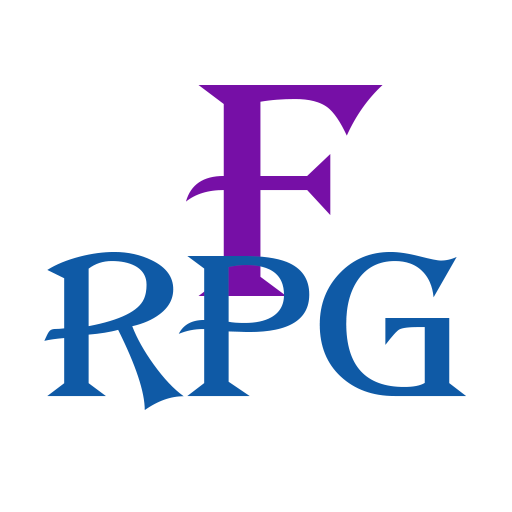
<style>
.page{position:relative;width:512px;height:512px;background:#ffffff}
.page>*{position:absolute;margin:0}
.t1{font:300px "AAlgerius";color:#760fa6}
.t2{font:200px "AAlgerius";color:#0f5aa6}
</style>
<div class="page">
<p class="t1" style="left:186px;top:85px;width:197px;height:211px">F</p>
<p class="t2" style="left:44px;top:252px;width:422px;height:158px">RPG</p>
</div>
